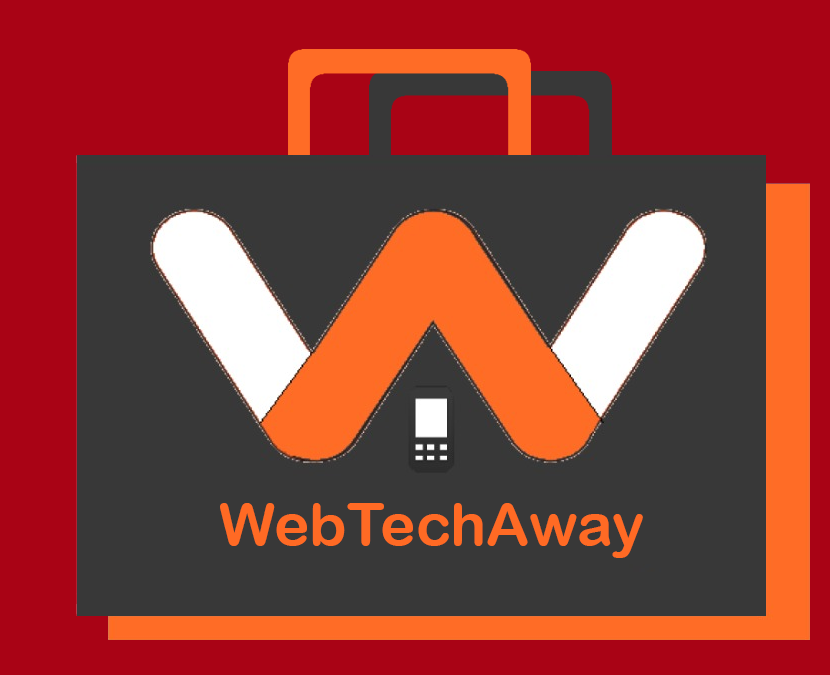
<style>
.page{position:relative;width:830px;height:675px;background:#383838}
.page>*{position:absolute;margin:0}
.t1{font:60px "ArialRoundedMTBold";color:#ff6a24}
</style>
<div class="page">
<p class="t1" style="left:220px;top:503px;width:423px;height:55px">WebTechAway</p>
</div>
